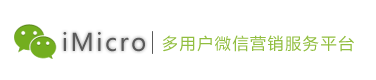
<style>
.page{position:relative;width:376px;height:80px;background:#ffffff}
.page>*{position:absolute;margin:0}
.t1{font:24px "MicrosoftYaHei";letter-spacing:0.1em;color:#595959}
.t2{font:16px "MicrosoftYaHei";letter-spacing:0.1em;color:#91be3f}
</style>
<div class="page">
<p class="t1" style="left:63px;top:32px;width:82px;height:20px">iMicro</p>
<p class="t2" style="left:162px;top:35px;width:192px;height:17px">多用户微信营销服务平台</p>
</div>
